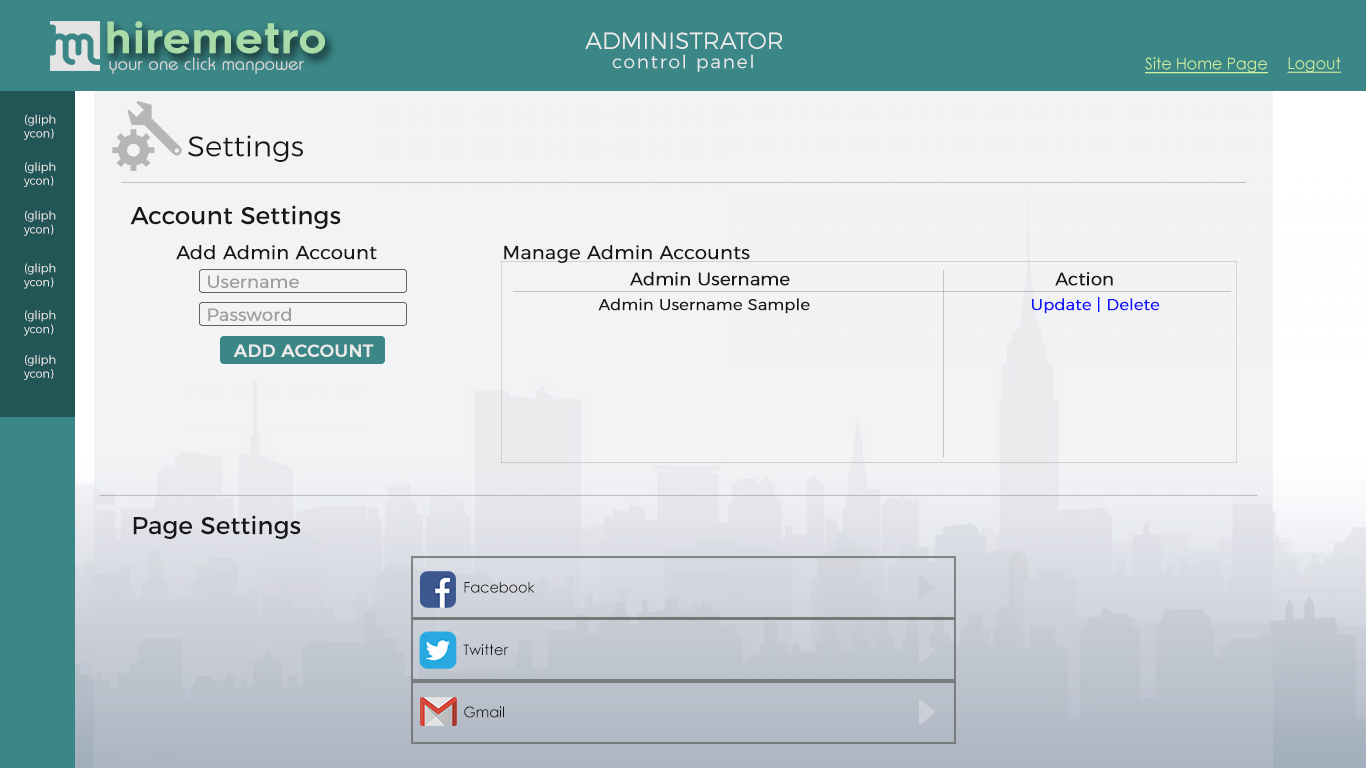
<style>
.page{position:relative;width:1366px;height:768px;background:#f2f3f5}
.page>*{position:absolute;margin:0}
.t1{font:42.1px "Renogare-Regular";color:#a8dba8}
.t2{font:23.6px "Montserrat-Light";color:#ebebeb}
.t3{font:18.4px "Montserrat-Light";letter-spacing:0.1em;color:#ebebeb}
.t4{font:17.5px "Brie-Light";color:#d5d5d5;font-weight:bold}
.t5{font:16.1px "CenturyGothic";color:#cff09e;text-decoration:underline}
.t6{font:11.5px "Montserrat-Light";color:#ebebeb}
.t7{font:28.9px "Montserrat-Light";color:#171717}
.t8{font:24.7px "Montserrat-Regular";color:#171717}
.t9{font:19px "Montserrat-Light";color:#171717;font-weight:bold}
.t10{font:17.6px "Montserrat-Light";color:#9e9fa0;font-weight:bold}
.t11{font:18.1px "Montserrat-Light";color:#171717;font-weight:bold}
.t12{font:15.9px "Montserrat-Light";color:#171717;font-weight:bold}
.t13{font:15.9px "Montserrat-Light";color:#1111fe;font-weight:bold}
.t14{font:17.6px "Montserrat-Regular";color:#ebebeb;font-weight:bold}
.t15{font:14.4px "CenturyGothic";color:#171717}
</style>
<div class="page">
<p class="t1" style="left:107px;top:21px;width:218px;height:33px">hiremetro</p>
<p class="t2" style="left:585px;top:32px;width:198px;height:17px">ADMINISTRATOR</p>
<p class="t3" style="left:612px;top:54px;width:141px;height:18px">control panel</p>
<p class="t4" style="left:109px;top:57px;width:195px;height:17px">your one click manpower</p>
<p class="t5" style="left:1145px;top:57px;width:123px;height:17px">Site Home Page</p>
<p class="t5" style="left:1287px;top:57px;width:54px;height:16px">Logout</p>
<p class="t6" style="left:24px;top:114px;width:32px;height:26px">(gliph<br>ycon)</p>
<p class="t7" style="left:188px;top:135px;width:115px;height:27px">Settings</p>
<p class="t6" style="left:24px;top:162px;width:32px;height:25px">(gliph<br>ycon)</p>
<p class="t8" style="left:130px;top:205px;width:211px;height:24px">Account Settings</p>
<p class="t6" style="left:24px;top:210px;width:32px;height:26px">(gliph<br>ycon)</p>
<p class="t9" style="left:176px;top:245px;width:201px;height:15px">Add Admin Account</p>
<p class="t9" style="left:504px;top:245px;width:246px;height:18px">Manage Admin Accounts</p>
<p class="t6" style="left:24px;top:263px;width:32px;height:26px">(gliph<br>ycon)</p>
<p class="t10" style="left:208px;top:275px;width:91px;height:13px">Username</p>
<p class="t11" style="left:630px;top:271px;width:160px;height:15px">Admin Username</p>
<p class="t11" style="left:1055px;top:272px;width:58px;height:14px">Action</p>
<p class="t12" style="left:598px;top:297px;width:562px;height:17px">Admin Username Sample       <span class="t13">Update | Delete</span></p>
<p class="t6" style="left:24px;top:310px;width:32px;height:26px">(gliph<br>ycon)</p>
<p class="t10" style="left:208px;top:307px;width:83px;height:14px">Password</p>
<p class="t14" style="left:233px;top:344px;width:141px;height:13px">ADD ACCOUNT</p>
<p class="t6" style="left:24px;top:355px;width:32px;height:25px">(gliph<br>ycon)</p>
<p class="t8" style="left:133px;top:515px;width:168px;height:24px">Page Settings</p>
<p class="t15" style="left:464px;top:581px;width:71px;height:12px">Facebook</p>
<p class="t15" style="left:463px;top:644px;width:45px;height:12px">Twitter</p>
<p class="t15" style="left:464px;top:706px;width:40px;height:12px">Gmail</p>
</div>
